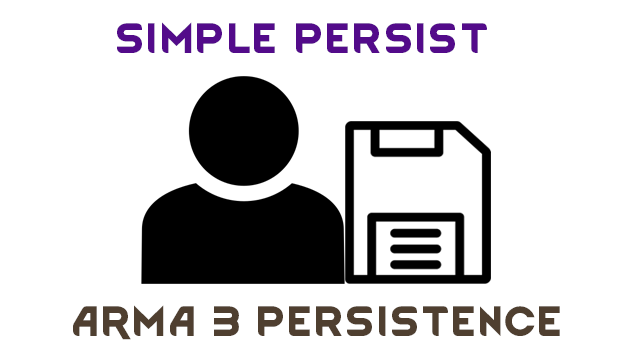
<style>
.page{position:relative;width:636px;height:358px;background:#ffffff}
.page>*{position:absolute;margin:0}
.t1{font:36px "RimWordFont";color:#530b8a}
.t2{font:36px "RimWordFont";color:#4f3f30}
</style>
<div class="page">
<p class="t1" style="left:117px;top:22px;width:370px;height:31px">Simple Persist</p>
<p class="t2" style="left:73px;top:305px;width:487px;height:35px">ARMA 3 Persistence</p>
</div>
